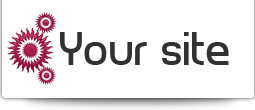
<style>
.page{position:relative;width:255px;height:110px;background:#ffffff}
.page>*{position:absolute;margin:0}
.t1{font:44px "PlanetEstyle";color:#323131}
</style>
<div class="page">
<p class="t1" style="left:60px;top:32px;width:169px;height:33px">Your site</p>
</div>
